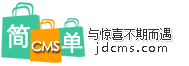
<style>
.page{position:relative;width:189px;height:66px;background:#ffffff}
.page>*{position:absolute;margin:0}
.t1{font:25px "STXihei";letter-spacing:0.1em;color:#ffffff;font-weight:bold}
.t2{font:13px "STXihei";letter-spacing:-0.05em;color:#ffffff;font-weight:bold}
.t3{font:22px "STXihei";letter-spacing:0.1em;color:#ffffff;font-weight:bold}
.t4{font:12px "MicrosoftYaHei";letter-spacing:0.1em;color:#333333}
</style>
<div class="page">
<p class="t1" style="left:6px;top:24px;width:24px;height:25px">简</p>
<p class="t2" style="left:31px;top:40px;width:29px;height:12px">CMS</p>
<p class="t3" style="left:61px;top:32px;width:22px;height:21px">单</p>
<p class="t4" style="left:95px;top:42px;width:72px;height:13px">jdcms.com</p>
</div>
